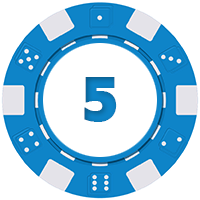
<style>
.page{position:relative;width:200px;height:200px;background:#ffffff}
.page>*{position:absolute;margin:0}
.t1{font:60px "VerdanaPro-CondBlack";color:#0e84c8}
</style>
<div class="page">
<p class="t1" style="left:84px;top:77px;width:33px;height:45px">5</p>
</div>
